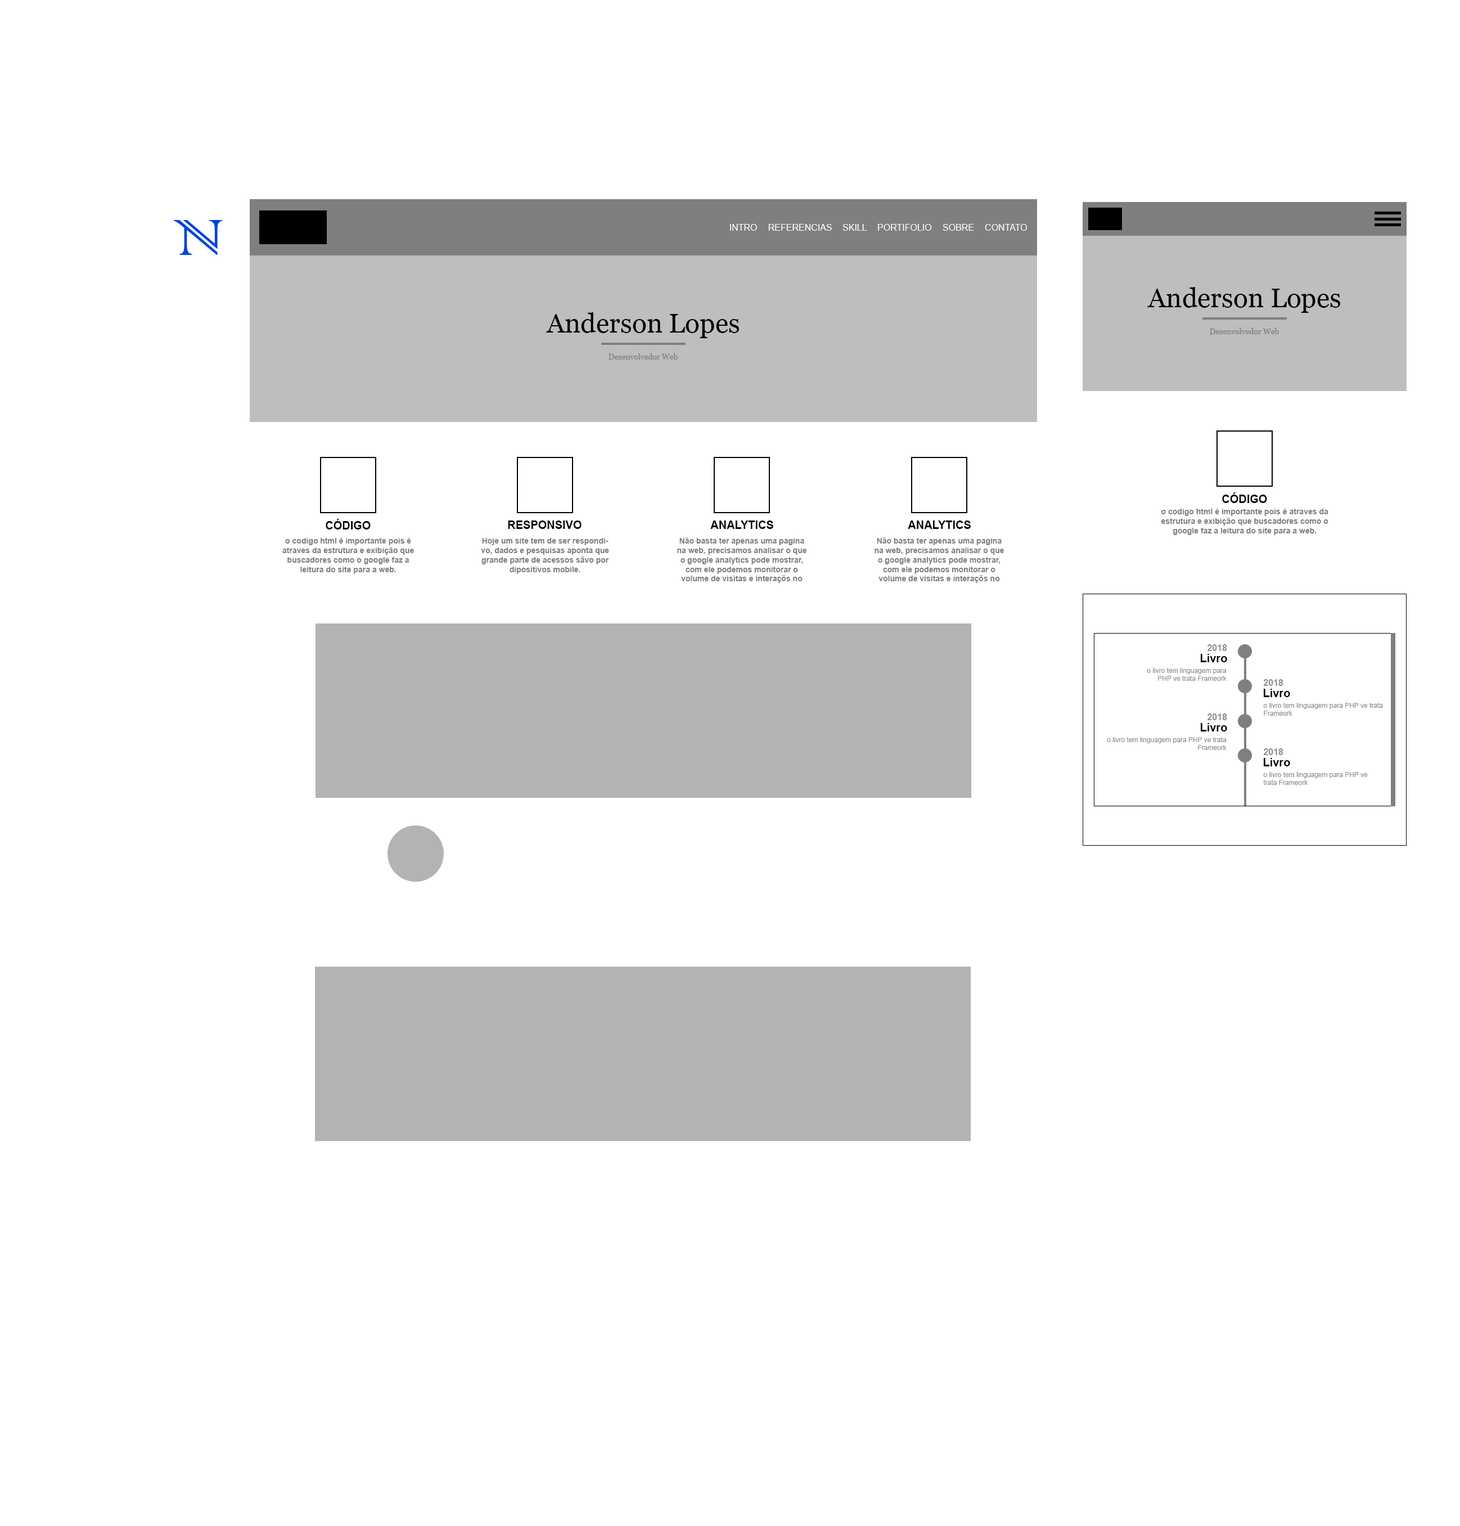
<style>
.page{position:relative;width:1460px;height:1526px;background:#ffffff}
.page>*{position:absolute;margin:0}
.t1{font:67.8px "ColonnaMT";color:#0044dd}
.t2{font:9px "ArialMT";color:#ffffff}
.t3{font:27px "Georgia";color:#000000}
.t4{font:7.9px "Georgia";color:#7f7f7f}
.t5{font:11.2px "Arial-BoldMT";color:#000000}
.t6{font:7.9px "Arial-BoldMT";color:#7f7f7f}
.t7{font:9px "Arial-BoldMT";color:#8f8f8f}
.t8{font:6.8px "ArialMT";color:#8f8f8f}
</style>
<div class="page">
<p class="t1" style="left:173px;top:220px;width:50px;height:35px">N</p>
<p class="t2" style="left:730px;top:224px;width:27px;height:7px">INTRO</p>
<p class="t2" style="left:768px;top:224px;width:64px;height:7px">REFERENCIAS</p>
<p class="t2" style="left:843px;top:224px;width:24px;height:7px">SKILL</p>
<p class="t2" style="left:878px;top:224px;width:54px;height:7px">PORTIFOLIO</p>
<p class="t2" style="left:943px;top:224px;width:31px;height:7px">SOBRE</p>
<p class="t2" style="left:985px;top:224px;width:42px;height:7px">CONTATO</p>
<p class="t3" style="left:1148px;top:287px;width:192px;height:26px">Anderson Lopes</p>
<p class="t3" style="left:546px;top:312px;width:193px;height:26px">Anderson Lopes</p>
<p class="t4" style="left:1210px;top:328px;width:69px;height:7px">Desenvolvedor Web</p>
<p class="t4" style="left:609px;top:353px;width:69px;height:7px">Desenvolvedor Web</p>
<p class="t5" style="left:1222px;top:492px;width:45px;height:11px">CÓDIGO</p>
<p class="t6" style="left:1161px;top:508px;width:168px;height:27px;text-align:center">o codigo html é importante pois é atraves da estrutura e exibição que buscadores como o google faz a leitura do site para a web.</p>
<p class="t5" style="left:326px;top:519px;width:45px;height:10px">CÓDIGO</p>
<p class="t5" style="left:508px;top:520px;width:74px;height:9px">RESPONSIVO</p>
<p class="t5" style="left:710px;top:520px;width:63px;height:9px">ANALYTICS</p>
<p class="t5" style="left:908px;top:520px;width:63px;height:9px">ANALYTICS</p>
<p class="t6" style="left:282px;top:537px;width:132px;height:37px;text-align:center">o codigo html é importante pois é atraves da estrutura e exibição que buscadores como o google faz a leitura do site para a web.</p>
<p class="t6" style="left:481px;top:538px;width:128px;height:36px;text-align:center">Hoje um site tem de ser respondivo, dados e pesquisas aponta que grande parte de acessos sãvo por dipositivos mobile.</p>
<p class="t6" style="left:677px;top:537px;width:130px;height:46px;text-align:center">Não basta ter apenas uma pagina na web, precisamos analisar o que o google analytics pode mostrar, com ele podemos monitorar o volume de visitas e interaçõs no site.</p>
<p class="t6" style="left:875px;top:537px;width:130px;height:46px;text-align:center">Não basta ter apenas uma pagina na web, precisamos analisar o que o google analytics pode mostrar, com ele podemos monitorar o volume de visitas e interaçõs no site.</p>
<p class="t5" style="left:1201px;top:654px;width:26px;height:8px">Livro</p>
<p class="t7" style="left:1207px;top:644px;width:20px;height:7px">2018</p>
<p class="t8" style="left:1147px;top:668px;width:80px;height:13px;text-align:right">o livro tem linguagem para PHP ve trata Frameork</p>
<p class="t7" style="left:1263px;top:679px;width:21px;height:7px">2018</p>
<p class="t5" style="left:1264px;top:688px;width:26px;height:9px">Livro</p>
<p class="t7" style="left:1207px;top:713px;width:20px;height:7px">2018</p>
<p class="t8" style="left:1263px;top:703px;width:120px;height:13px">o livro tem linguagem para PHP ve trata Frameork</p>
<p class="t5" style="left:1201px;top:723px;width:26px;height:8px">Livro</p>
<p class="t8" style="left:1107px;top:737px;width:120px;height:13px;text-align:right">o livro tem linguagem para PHP ve trata Frameork</p>
<p class="t7" style="left:1263px;top:748px;width:21px;height:7px">2018</p>
<p class="t5" style="left:1264px;top:758px;width:26px;height:8px">Livro</p>
<p class="t8" style="left:1263px;top:772px;width:105px;height:13px">o livro tem linguagem para PHP ve trata Frameork</p>
</div>
